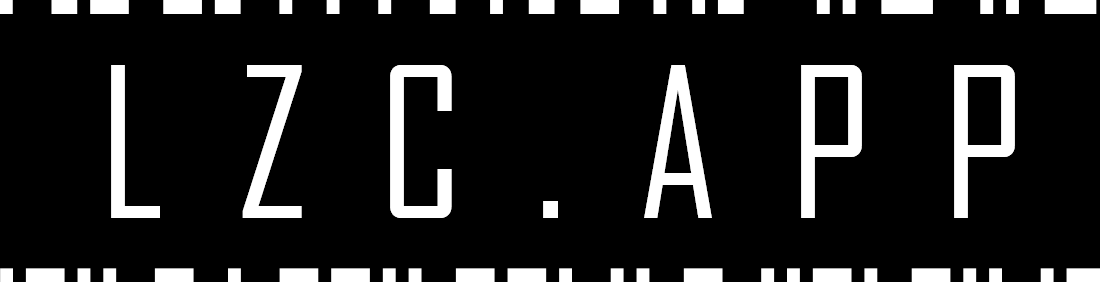
<style>
.page{position:relative;width:1100px;height:282px;background:#000000}
.page>*{position:absolute;margin:0}
.t1{font:200px "AgencyFB-Reg";letter-spacing:0.08em;color:#ffffff}
</style>
<div class="page">
<p class="t1" style="left:111px;top:65px;width:904px;height:153px">L Z C . A P P</p>
</div>
